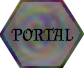
<style>
.page{position:relative;width:84px;height:68px;background:#ffffff}
.page>*{position:absolute;margin:0}
.t1{font:18px "AlmendraSC-Regular";color:#050202}
</style>
<div class="page">
<p class="t1" style="left:11px;top:27px;width:63px;height:15px">PORTAL</p>
</div>
